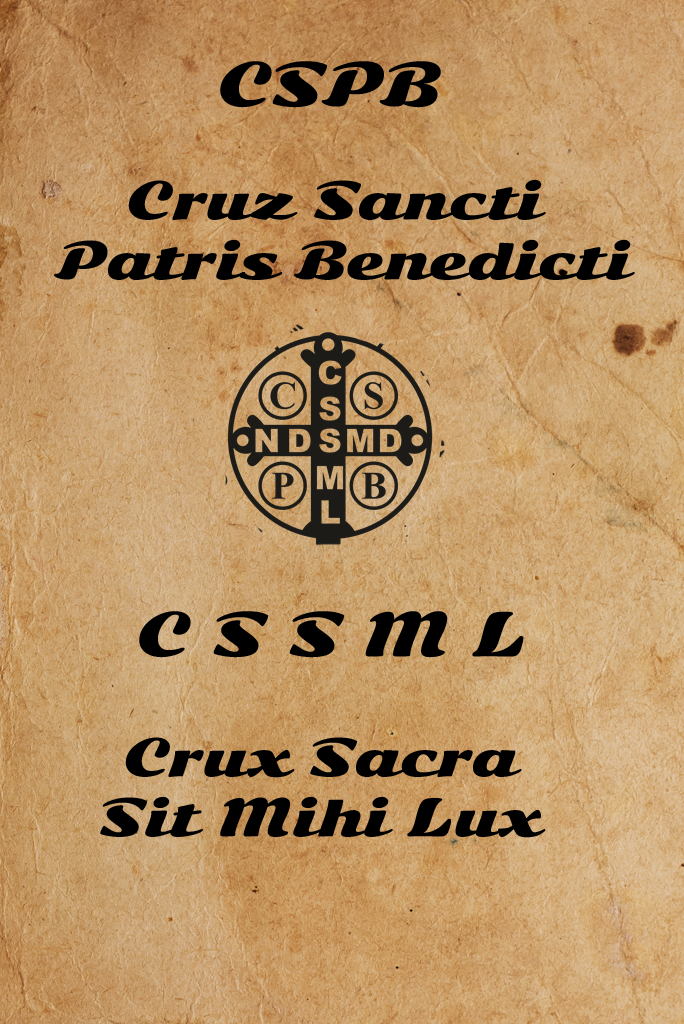
<style>
.page{position:relative;width:684px;height:1024px}
.page>*{position:absolute;margin:0}
.t1{font:58.3px "SonsieOne-Regular";color:#000000}
.t2{font:50px "SonsieOne-Regular";color:#000000}
</style>
<div class="page">
<p class="t1" style="left:220px;top:61px;width:221px;height:47px">CSPB</p>
<p class="t2" style="left:54px;top:179px;width:581px;height:101px;text-align:center">Cruz Sancti <br>Patris Benedicti</p>
<p class="t1" style="left:139px;top:611px;width:385px;height:47px"><span class="t2"> </span>C S S M L</p>
<p class="t2" style="left:100px;top:737px;width:446px;height:101px;text-align:center">Crux Sacra <br>Sit Mihi Lux</p>
</div>
